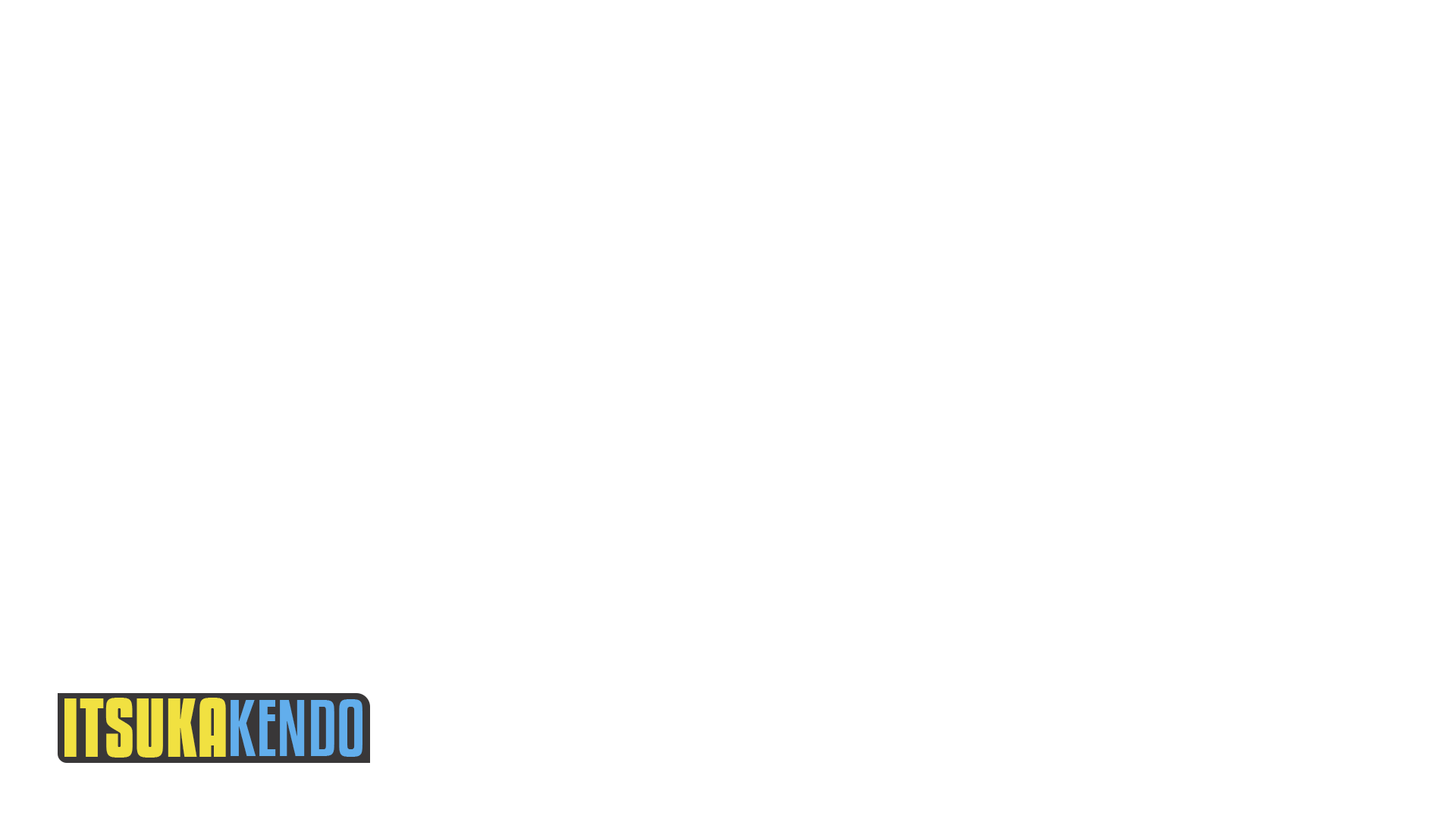
<style>
.page{position:relative;width:1456px;height:819px;background:#ffffff}
.page>*{position:absolute;margin:0}
.t1{font:72.5px "KenyanCoffeeRg-Bold";color:#f1e141}
.t2{font:70.5px "KenyanCoffeeRg-Regular";color:#62aeec}
</style>
<div class="page">
<p class="t1" style="left:64px;top:698px;width:162px;height:60px">ITSUKA</p>
<p class="t2" style="left:231px;top:699px;width:131px;height:58px">KENDO</p>
</div>
